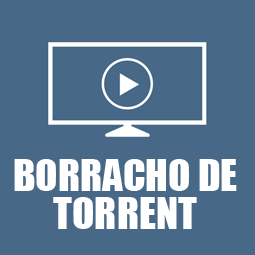
<style>
.page{position:relative;width:255px;height:255px;background:#486887}
.page>*{position:absolute;margin:0}
.t1{font:41px/38px "Impact";color:#ffffff}
</style>
<div class="page">
<p class="t1" style="left:14px;top:159px;width:223px;height:70px;text-align:center">BORRACHO DE<br>TORRENT</p>
</div>
